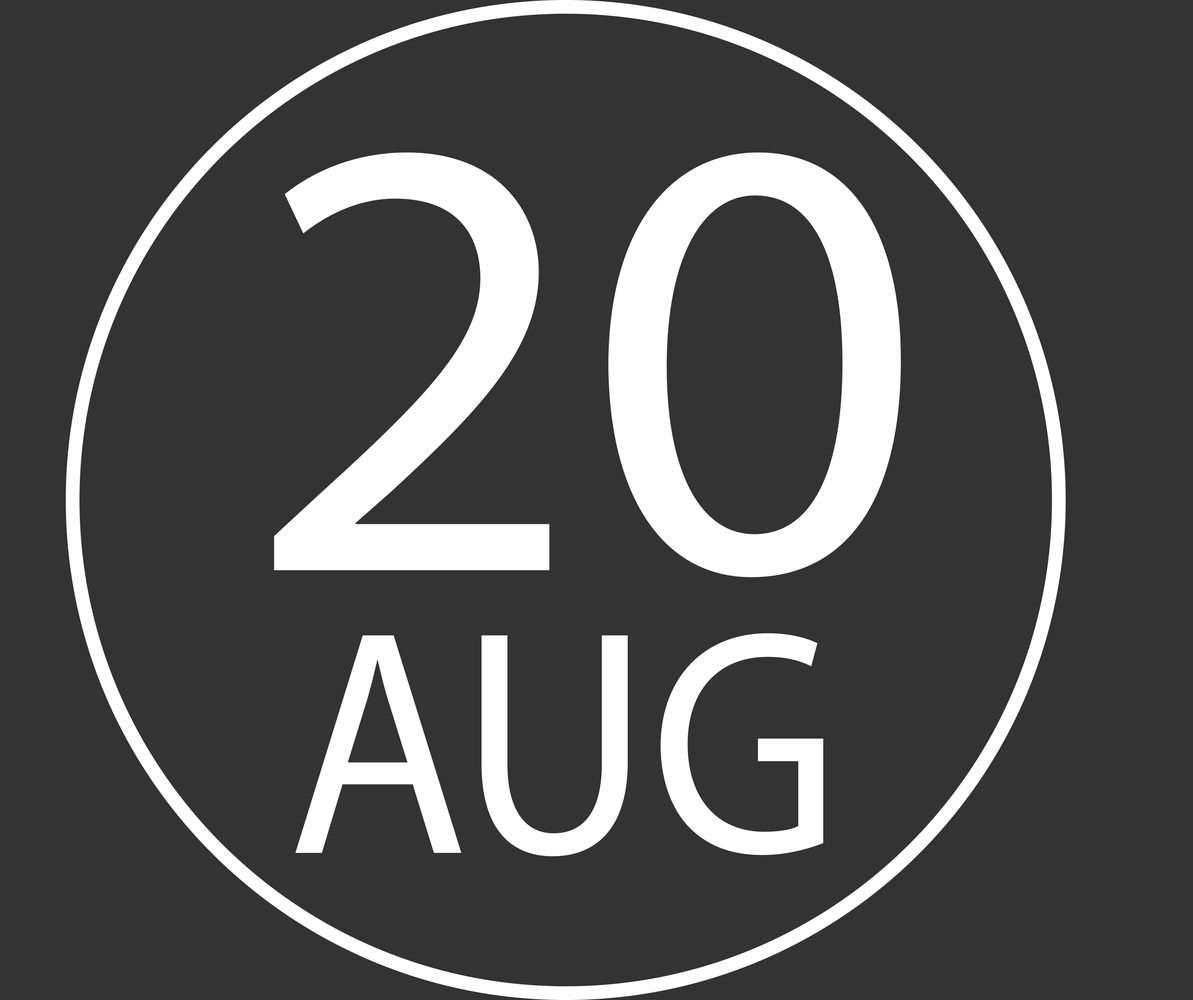
<style>
.page{position:relative;width:1193px;height:1000px;background:#333333}
.page>*{position:absolute;margin:0}
.t1{font:631.8px "MyriadPro-Regular";color:#ffffff;scale:1.05 1}
.t2{font:322.8px "MyriadPro-Regular";color:#ffffff;scale:0.91 1}
</style>
<div class="page">
<p class="t1" style="left:274px;top:152px;width:627px;height:425px">20</p>
<p class="t2" style="left:295px;top:633px;width:528px;height:223px">AUG</p>
</div>
